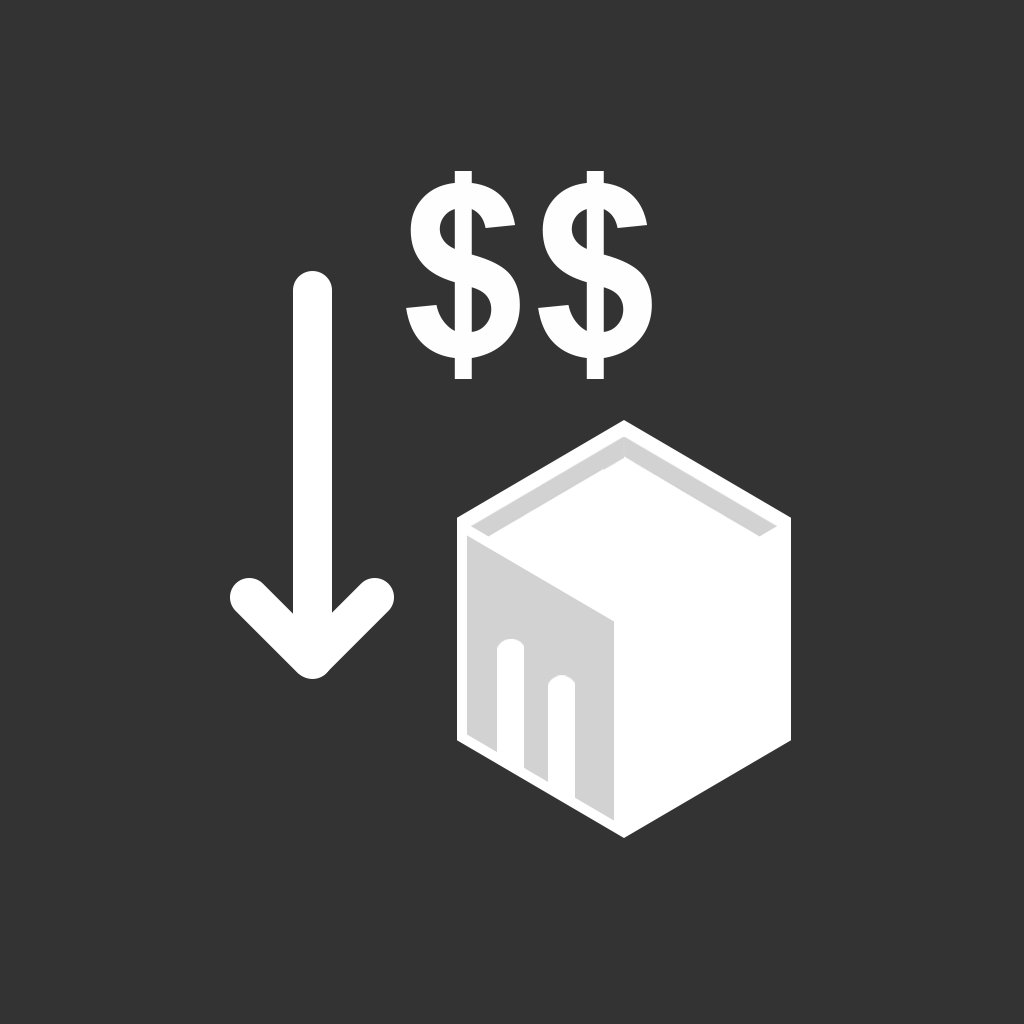
<style>
.page{position:relative;width:1024px;height:1024px;background:#333333}
.page>*{position:absolute;margin:0}
.t1{font:238.5px "Arial-BoldMT";color:#fefefe}
</style>
<div class="page">
<p class="t1" style="left:406px;top:171px;width:246px;height:208px">$$</p>
</div>
